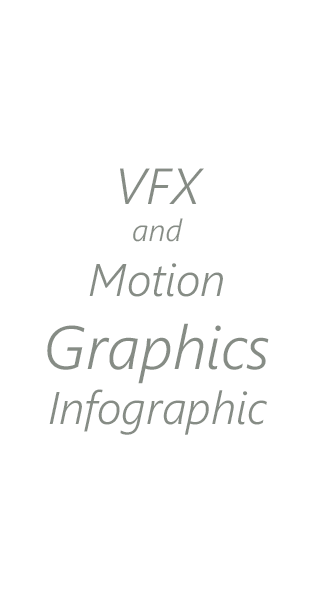
<style>
.page{position:relative;width:320px;height:600px;background:#ffffff}
.page>*{position:absolute;margin:0}
.t1{font:45.7px "SegoeUI-SemilightItalic";color:#868c85}
.t2{font:50.8px "SegoeUI-SemilightItalic";color:#868c85}
.t3{font:30.5px "SegoeUI-SemilightItalic";color:#868c85}
.t4{font:61px "SegoeUI-SemilightItalic";color:#868c85}
</style>
<div class="page">
<p class="t1" style="left:47px;top:168px;width:222px;height:267px;text-align:center"><span class="t2">VFX<br></span><span class="t3">and<br></span>Motion<br><span class="t4">Graphics<br></span>Infographic</p>
</div>
